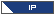
<style>
.page{position:relative;width:55px;height:15px;background:#1c3d7d}
.page>*{position:absolute;margin:0}
.t1{font:8px "BitDustTwo";color:#ffffff}
</style>
<div class="page">
<p class="t1" style="left:29px;top:5px;width:7px;height:5px">IP</p>
</div>
